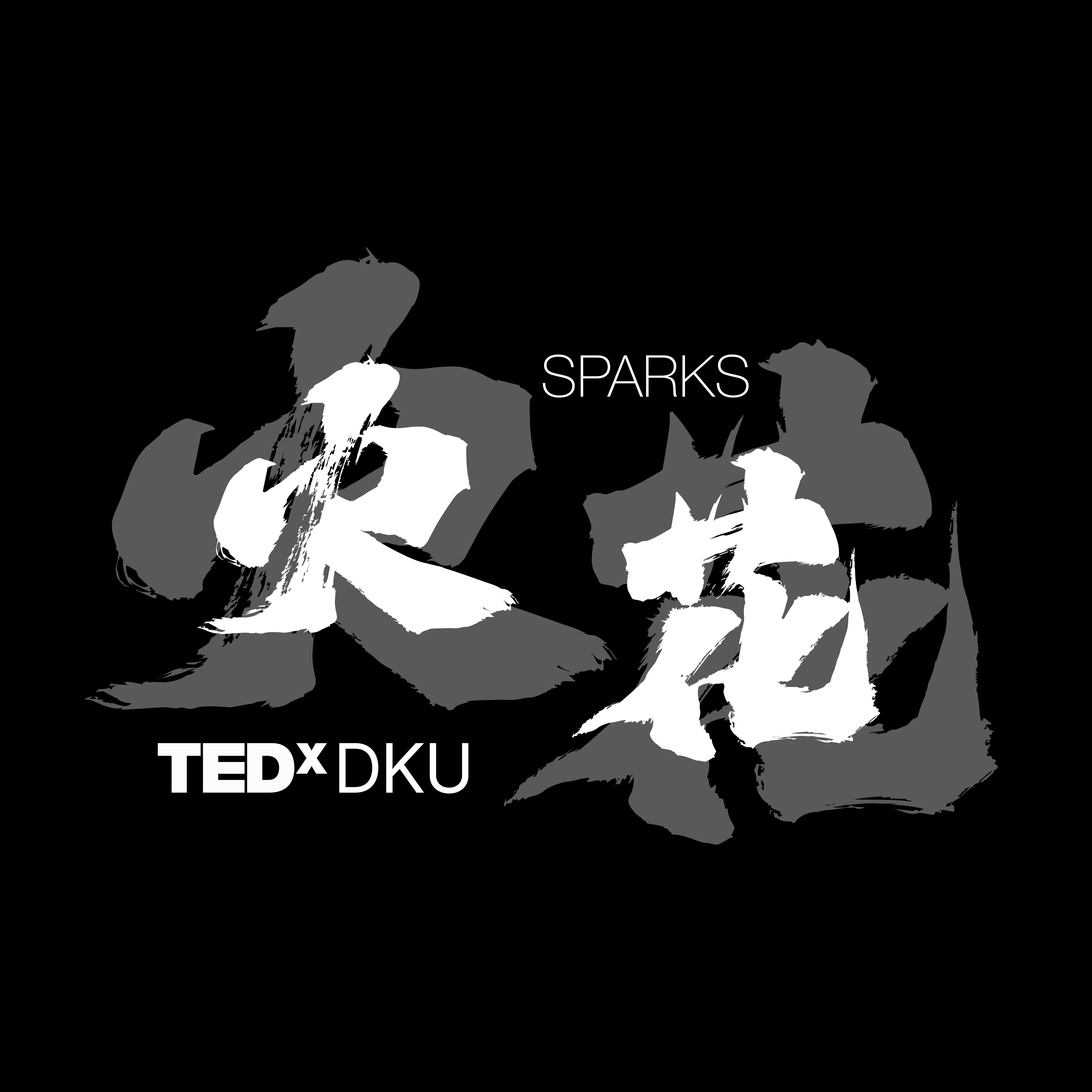
<style>
.page{position:relative;width:1092px;height:1092px;background:#000000}
.page>*{position:absolute;margin:0}
.t1{font:701.5px "HelloFont-ID-CangQiongTi";color:#595959}
.t2{font:643.9px "HelloFont-ID-CangQiongTi"}
.t3{font:424.1px "HelloFont-ID-CangQiongTi";color:#ffffff}
.t4{font:58px "HelveticaNeue-Thin";color:#ffffff}
.t5{font:401.1px "HelloFont-ID-CangQiongTi";color:#ffffff}
</style>
<div class="page">
<p class="t1" style="left:85px;top:247px;width:532px;height:463px">火</p>
<p class="t2" style="left:503px;top:339px;width:495px;height:506px">花</p>
<p class="t3" style="left:197px;top:354px;width:322px;height:281px">火</p>
<p class="t4" style="left:543px;top:354px;width:206px;height:44px">SPARKS</p>
<p class="t5" style="left:572px;top:447px;width:308px;height:315px">花</p>
</div>
